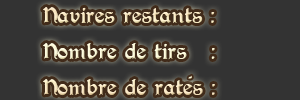
<style>
.page{position:relative;width:300px;height:100px;background:#333333}
.page>*{position:absolute;margin:0}
.t1{font:16px/36px "PerryGothic"}
.t2{font:9px "PerryGothic";color:#fdfadd}
</style>
<div class="page">
<p class="t1" style="left:43px;top:7px;width:172px;height:89px">Navires restants :<br>Nombre de tirs   :<br>Nombre de rates :</p>
<p class="t2" style="left:188px;top:75px;width:4px;height:4px;rotate:-30deg">-</p>
</div>
